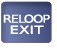
<style>
.page{position:relative;width:57px;height:48px;background:#ffffff}
.page>*{position:absolute;margin:0}
.t1{font:10.8px/11px "DejaVuSansCondensed";letter-spacing:-0.1em;color:#ffffff;font-weight:bold;scale:1.35 1}
.t2{font:10.8px/11px "DejaVuSansCondensed";color:#ffffff;font-weight:bold;scale:1.5 1}
</style>
<div class="page">
<p class="t1" style="left:3px;top:14px;width:47px;height:20px;text-align:center">RELOOP<br><span class="t2">EXIT</span></p>
</div>
